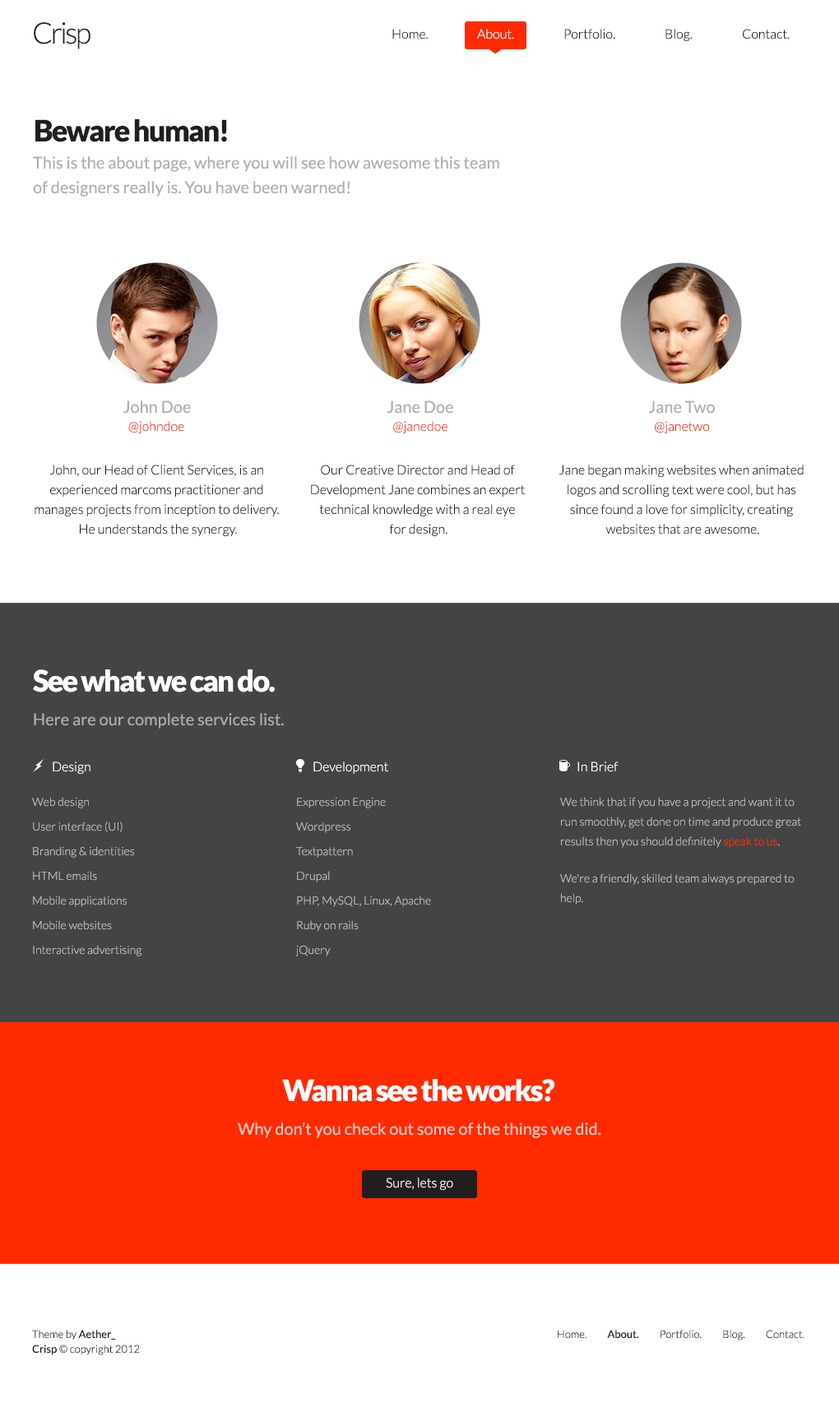
<style>
.page{position:relative;width:839px;height:1421px;background:#ffffff}
.page>*{position:absolute;margin:0}
.t1{font:29.6px "Lato-Light";letter-spacing:-0.075em;color:#221e1e}
.t2{font:13.2px "Lato-Light";color:#221e1e}
.t3{font:13.2px "Lato-Light";color:#ffffff}
.t4{font:29.6px "Lato-Black";letter-spacing:-0.05em;color:#221e1e}
.t5{font:16.5px/24.7px "Lato-Regular";color:#b0b0b0}
.t6{font:16.5px "Lato-Regular";color:#b0b0b0}
.t7{font:13.2px "Lato-Light";color:#ff2a00}
.t8{font:13.2px/19.7px "Lato-Light";color:#221e1e}
.t9{font:29.6px "Lato-Black";letter-spacing:-0.05em;color:#ffffff}
.t10{font:16.5px "Lato-Regular";color:#a9a9a9}
.t11{font:11.5px/24.7px "Lato-Light";color:#bdbdbd}
.t12{font:11.5px/19.7px "Lato-Light";color:#bdbdbd}
.t13{font:11.5px/19.7px "Lato-Light";color:#ff2a00}
.t14{font:16.5px "Lato-Regular";color:#ffc6bb}
.t15{font:10.7px/14.8px "Lato-Light";color:#221e1e}
.t16{font:10.7px/14.8px "Lato-Regular";color:#221e1e}
.t17{font:10.7px "Lato-Light";color:#221e1e}
.t18{font:10.7px "Lato-Regular";color:#221e1e}
</style>
<div class="page">
<p class="t1" style="left:34px;top:22px;width:56px;height:27px">Crisp</p>
<p class="t2" style="left:392px;top:29px;width:36px;height:10px">Home.</p>
<p class="t3" style="left:477px;top:29px;width:37px;height:10px">About.</p>
<p class="t2" style="left:564px;top:29px;width:51px;height:10px">Portfolio.</p>
<p class="t2" style="left:665px;top:29px;width:28px;height:12px">Blog.</p>
<p class="t2" style="left:742px;top:29px;width:48px;height:10px">Contact.</p>
<p class="t4" style="left:35px;top:119px;width:192px;height:23px">Beware human!</p>
<p class="t5" style="left:33px;top:156px;width:466px;height:41px">This is the about page, where you will see how awesome this team <br>of designers really is. You have been warned!</p>
<p class="t6" style="left:123px;top:401px;width:68px;height:13px">John Doe</p>
<p class="t6" style="left:387px;top:401px;width:66px;height:13px">Jane Doe</p>
<p class="t6" style="left:648px;top:401px;width:67px;height:13px">Jane Two</p>
<p class="t7" style="left:128px;top:421px;width:56px;height:12px">@johndoe</p>
<p class="t7" style="left:393px;top:421px;width:54px;height:12px">@janedoe</p>
<p class="t7" style="left:655px;top:421px;width:55px;height:12px">@janetwo</p>
<p class="t8" style="left:35px;top:465px;width:244px;height:71px;text-align:center">John, our Head of Client Services, is an <br>experienced marcoms practitioner and <br>manages projects from inception to delivery. <br>He understands the synergy.</p>
<p class="t8" style="left:311px;top:465px;width:214px;height:71px;text-align:center">Our Creative Director and Head of <br>Development Jane combines an expert <br>technical knowledge with a real eye <br>for design.</p>
<p class="t8" style="left:558px;top:465px;width:246px;height:70px;text-align:center">Jane began making websites when animated <br>logos and scrolling text were cool, but has <br>since found a love for simplicity, creating <br>websites that are awesome.</p>
<p class="t9" style="left:33px;top:670px;width:242px;height:23px">See what we can do.</p>
<p class="t10" style="left:34px;top:713px;width:250px;height:16px">Here are our complete services list.</p>
<p class="t3" style="left:53px;top:762px;width:37px;height:12px">Design</p>
<p class="t3" style="left:313px;top:762px;width:75px;height:12px">Development</p>
<p class="t3" style="left:577px;top:762px;width:42px;height:10px">In Brief</p>
<p class="t11" style="left:32px;top:797px;width:110px;height:160px">Web design<br>User interface (UI)<br>Branding &amp; identities<br>HTML emails<br>Mobile applications<br>Mobile websites<br>Interactive advertising</p>
<p class="t11" style="left:295px;top:798px;width:136px;height:159px">Expression Engine<br>Wordpress<br>Textpattern<br>Drupal<br>PHP, MySQL, Linux, Apache<br>Ruby on rails<br>jQuery</p>
<p class="t12" style="left:560px;top:797px;width:241px;height:51px">We think that if you have a project and want it to <br>run smoothly, get done on time and produce great <br>results then you should definitely <span class="t13">speak to us</span>.</p>
<p class="t12" style="left:560px;top:874px;width:235px;height:31px">We're a friendly, skilled team always prepared to <br>help.</p>
<p class="t9" style="left:282px;top:1079px;width:273px;height:23px">Wanna see the works?</p>
<p class="t14" style="left:238px;top:1122px;width:363px;height:16px">Why don’t you check out some of the things we did.</p>
<p class="t3" style="left:386px;top:1178px;width:67px;height:12px">Sure, lets go</p>
<p class="t15" style="left:32px;top:1330px;width:108px;height:26px">Theme by <span class="t16">Aether_<br>Crisp </span>© copyright 2012</p>
<p class="t17" style="left:558px;top:1330px;width:246px;height:11px">Home.          <span class="t18">About.          </span>Portfolio.          Blog.          Contact.</p>
</div>
